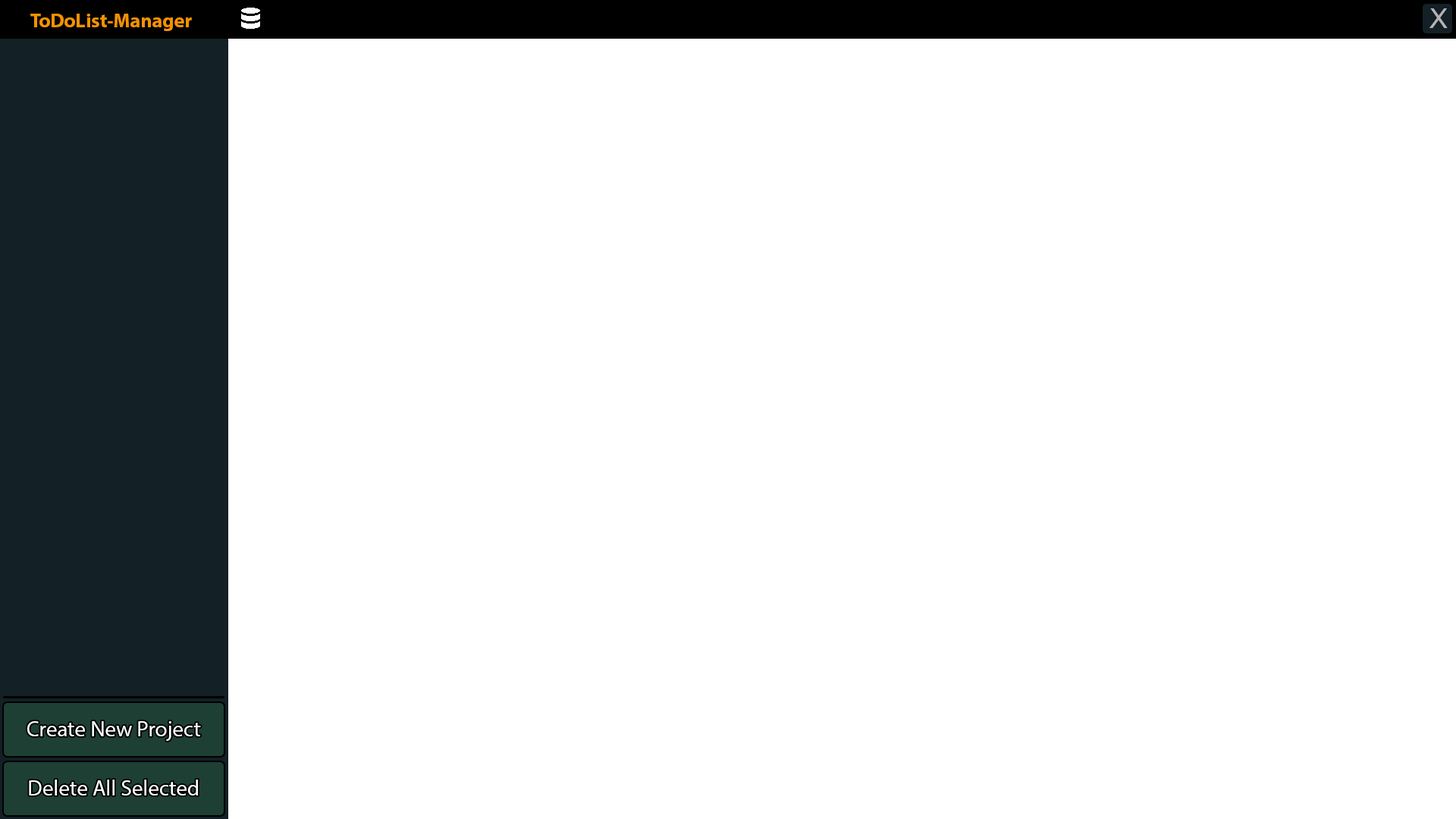
<style>
.page{position:relative;width:1456px;height:819px;background:#ffffff}
.page>*{position:absolute;margin:0}
.t1{font:19.7px "MyriadPro-Bold";color:#f39200}
.t2{font:27.3px "ArialMT";color:#b4b3b3}
.t3{font:22px "MyriadPro-Regular";color:#ffffff}
</style>
<div class="page">
<p class="t1" style="left:30px;top:14px;width:162px;height:17px">ToDoList-Manager</p>
<p class="t2" style="left:1429px;top:8px;width:19px;height:20px">X</p>
<p class="t3" style="left:27px;top:721px;width:174px;height:20px">Create New Project</p>
<p class="t3" style="left:29px;top:780px;width:169px;height:15px">Delete All Selected</p>
</div>
